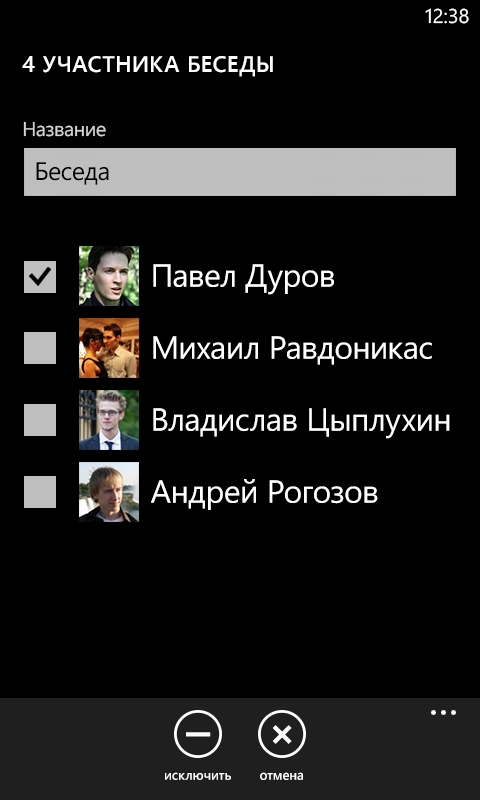
<style>
.page{position:relative;width:480px;height:800px;background:#000000}
.page>*{position:absolute;margin:0}
.t1{font:20px "SegoeWP";color:#ffffff}
.t2{font:22.7px "SegoeWP-Semibold";letter-spacing:0.025em;color:#ffffff;text-transform:uppercase}
.t3{font:25.4px "SegoeWP";letter-spacing:-0.025em;color:#000000}
.t4{font:32px "SegoeWP";letter-spacing:-0.01em;color:#ffffff}
.t5{font:13.3px "SegoeWP-Semibold";letter-spacing:-0.01em;color:#ffffff}
</style>
<div class="page">
<p class="t1" style="left:425px;top:8px;width:44px;height:16px">12:38</p>
<p class="t2" style="left:22px;top:56px;width:251px;height:21px">4 участника беседы</p>
<p class="t3" style="left:36px;top:162px;width:73px;height:23px">Беседа</p>
<p class="t4" style="left:153px;top:264px;width:181px;height:31px">Павел Дуров</p>
<p class="t4" style="left:153px;top:336px;width:279px;height:29px">Михаил Равдоникас</p>
<p class="t4" style="left:153px;top:408px;width:297px;height:31px">Владислав Цыплухин</p>
<p class="t4" style="left:151px;top:479px;width:227px;height:31px">Андрей Рогозов</p>
<p class="t5" style="left:165px;top:772px;width:66px;height:8px">исключить</p>
<p class="t5" style="left:260px;top:772px;width:43px;height:8px">отмена</p>
</div>
